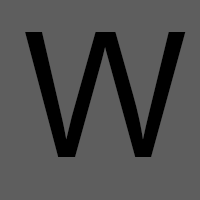
<style>
.page{position:relative;width:200px;height:200px;background:#5e5e5e}
.page>*{position:absolute;margin:0}
.t1{font:174.2px "ArialMT";color:#000000}
</style>
<div class="page">
<p class="t1" style="left:25px;top:32px;width:161px;height:125px">W</p>
</div>
